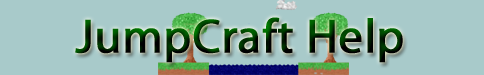
<style>
.page{position:relative;width:484px;height:75px;background:#a8caca}
.page>*{position:absolute;margin:0}
.t1{font:47.8px "MyriadPro-Regular";font-weight:bold}
</style>
<div class="page">
<p class="t1" style="left:75px;top:17px;width:328px;height:46px">JumpCraft Help</p>
</div>
